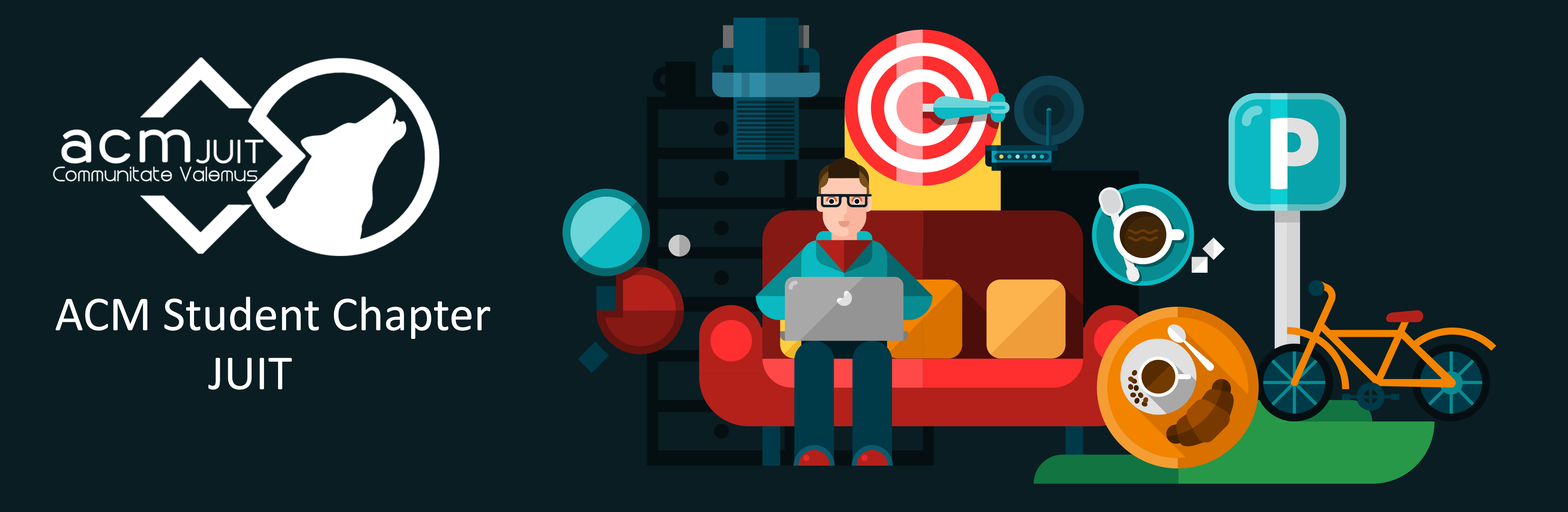
<style>
.page{position:relative;width:1568px;height:512px;background:#0a1d23}
.page>*{position:absolute;margin:0}
.t1{font:49.2px "Calibri";letter-spacing:0.002em;color:#ffffff}
</style>
<div class="page">
<p class="t1" style="left:55px;top:297px;width:435px;height:93px">ACM Student Chapter <br>             JUIT</p>
</div>
